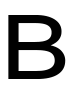
<style>
.page{position:relative;width:71px;height:96px;background:#ffffff}
.page>*{position:absolute;margin:0}
.t1{font:89.4px "MicrosoftSansSerif";color:#010101;scale:1.19 1}
</style>
<div class="page">
<p class="t1" style="left:8px;top:15px;width:58px;height:64px">B</p>
</div>
